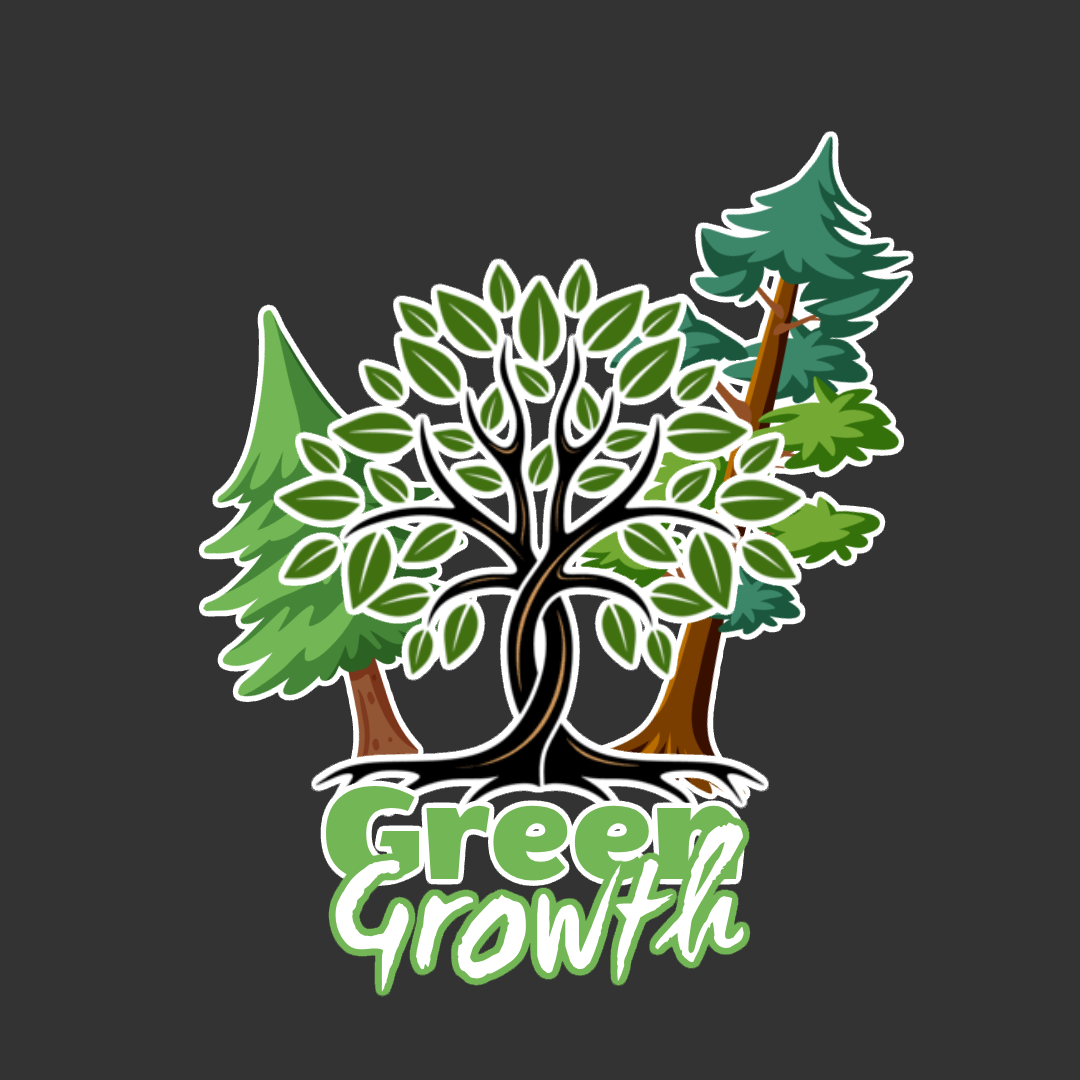
<style>
.page{position:relative;width:1080px;height:1080px;background:#333333}
.page>*{position:absolute;margin:0}
.t1{font:150px "WendyOne-Regular";color:#73b655}
.t2{font:150px "WCManoNegraBta";color:#ffffff}
</style>
<div class="page">
<p class="t1" style="left:326px;top:786px;width:414px;height:95px">Green</p>
<p class="t2" style="left:335px;top:822px;width:409px;height:170px">Growth</p>
</div>
